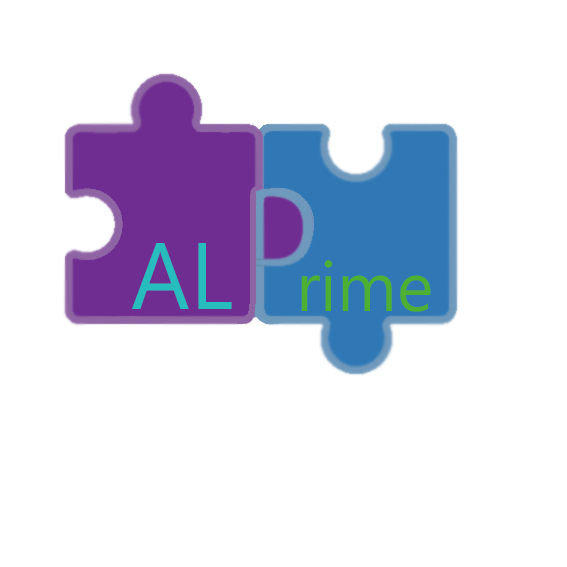
<style>
.page{position:relative;width:567px;height:567px;background:#ffffff}
.page>*{position:absolute;margin:0}
.t1{font:94.3px "SegoeUISymbol";color:#27bdbe;scale:0.97 1}
.t2{font:69.3px "SegoeUI";color:#4db033}
</style>
<div class="page">
<p class="t1" style="left:132px;top:243px;width:100px;height:66px">AL</p>
<p class="t2" style="left:301px;top:260px;width:130px;height:52px">rime</p>
</div>
